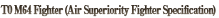
<style>
.page{position:relative;width:219px;height:18px;background:#ffffff}
.page>*{position:absolute;margin:0}
.t1{font:11px "RyuminPro-ExBold";letter-spacing:-0.095em;color:#4a3f32;font-weight:bold;scale:0.85 1}
</style>
<div class="page">
<p class="t1" style="left:0px;top:5px;width:216px;height:12px">T0 M64 Fighter (Air Superiority Fighter Specification)</p>
</div>
